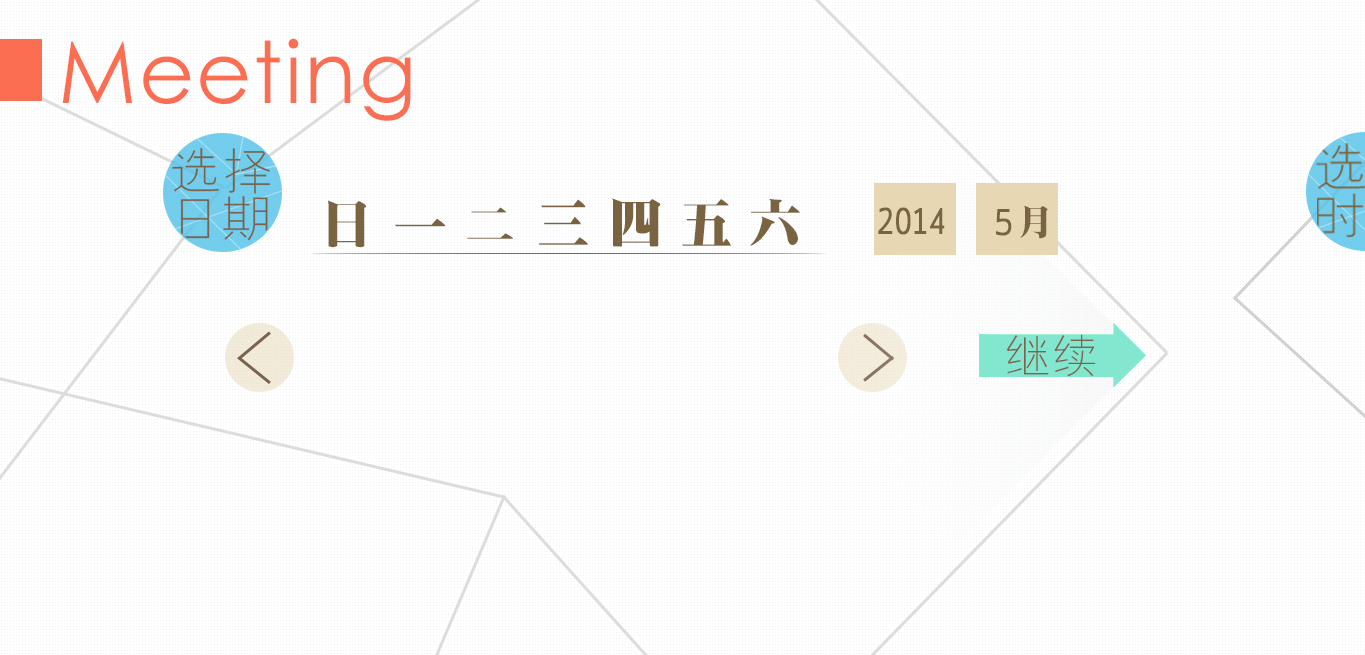
<style>
.page{position:relative;width:1365px;height:655px;background:#ffffff}
.page>*{position:absolute;margin:0}
.t1{font:85.8px "CenturyGothic";letter-spacing:0.025em;color:#fb6e52}
.t2{font:56.4px "RS_CuBiao";letter-spacing:0.025em;color:#796341}
.t3{font:37.1px "LigurinoCondensed";letter-spacing:0.025em;color:#796341}
.t4{font:37.1px "Ligurino";letter-spacing:0.025em;color:#796341}
.t5{font:36.2px "RS_CuBiao";letter-spacing:0.025em;color:#796341}
.t6{font:46.1px "FZYXJW--GB1-0";letter-spacing:0.025em;color:#7b644f}
</style>
<div class="page">
<p class="t1" style="left:62px;top:38px;width:349px;height:83px">Meeting</p>
<p class="t2" style="left:612px;top:198px;width:49px;height:49px">四</p>
<p class="t2" style="left:328px;top:200px;width:38px;height:48px">日</p>
<p class="t2" style="left:467px;top:207px;width:46px;height:32px">二</p>
<p class="t2" style="left:538px;top:199px;width:50px;height:46px">三</p>
<p class="t2" style="left:682px;top:199px;width:49px;height:47px">五</p>
<p class="t2" style="left:750px;top:199px;width:50px;height:47px">六</p>
<p class="t3" style="left:878px;top:207px;width:67px;height:28px">2014</p>
<p class="t4" style="left:995px;top:209px;width:17px;height:27px">5</p>
<p class="t5" style="left:1020px;top:206px;width:28px;height:33px">月</p>
<p class="t2" style="left:395px;top:218px;width:51px;height:9px">一</p>
<p class="t6" style="left:1007px;top:334px;width:89px;height:43px">继续</p>
</div>
